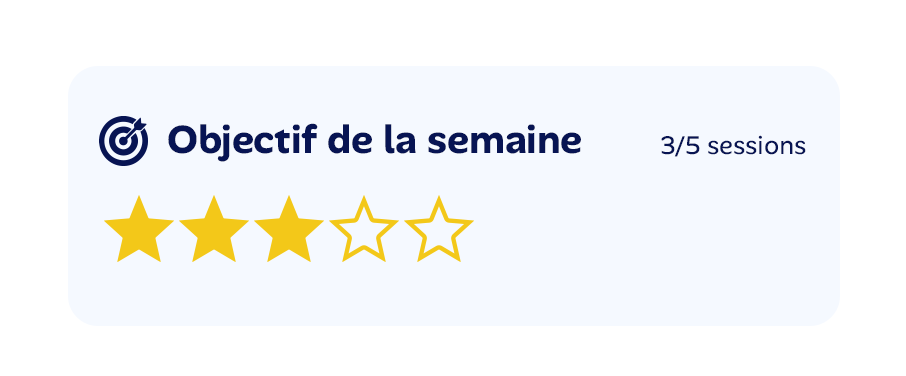
<style>
.page{position:relative;width:906px;height:376px;background:#f5f9ff}
.page>*{position:absolute;margin:0}
.t1{font:40px "AlanSans-Bold";color:#071453}
.t2{font:26px "AlanSans-Regular";color:#071453}
</style>
<div class="page">
<p class="t1" style="left:168px;top:123px;width:413px;height:39px">Objectif de la semaine</p>
<p class="t2" style="left:661px;top:135px;width:145px;height:22px">3/5 sessions</p>
</div>
